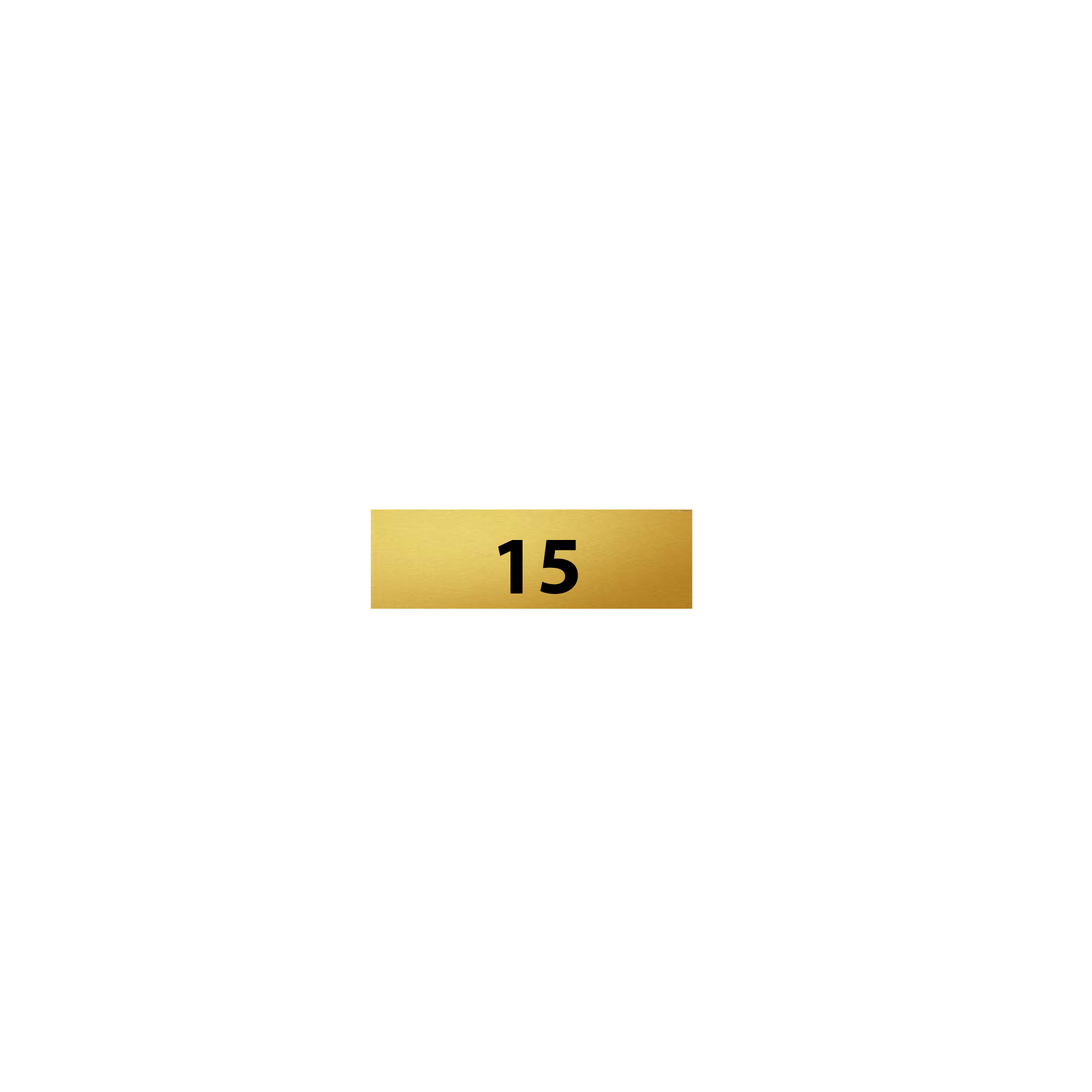
<style>
.page{position:relative;width:1092px;height:1092px;background:#ffffff}
.page>*{position:absolute;margin:0}
.t1{font:81.9px "MyriadPro-Bold";color:#000000}
</style>
<div class="page">
<p class="t1" style="left:498px;top:540px;width:80px;height:54px">15</p>
</div>
